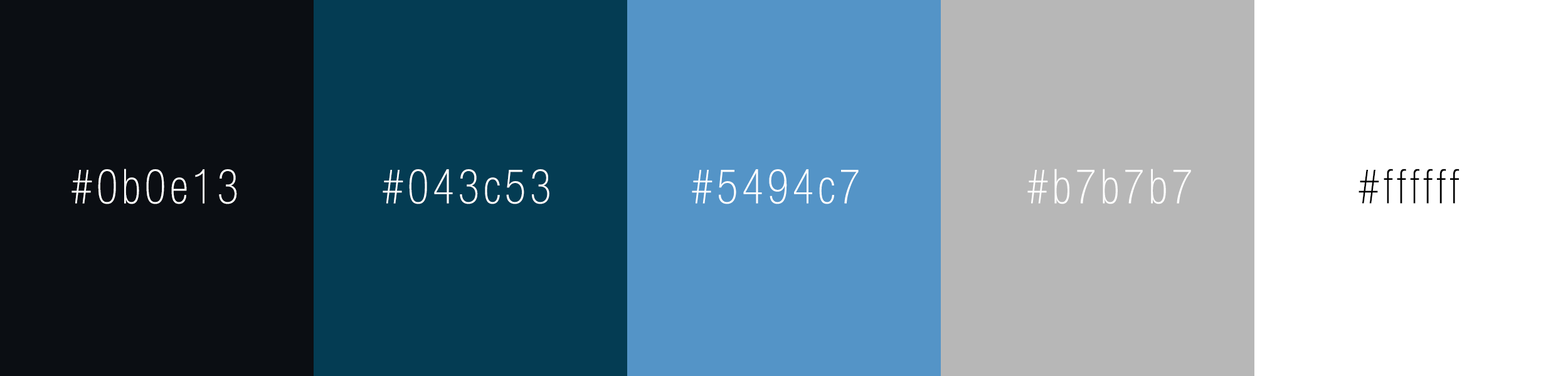
<style>
.page{position:relative;width:1568px;height:376px;background:#ffffff}
.page>*{position:absolute;margin:0}
.t1{font:47.9px "HelveticaNeueLTStd-ThCn";letter-spacing:0.1em;color:#ffffff;scale:0.91 1}
.t2{font:47.9px "HelveticaNeueLTStd-ThCn";letter-spacing:0.1em;color:#000000;scale:0.91 1}
</style>
<div class="page">
<p class="t1" style="left:72px;top:169px;width:165px;height:35px">#0b0e13</p>
<p class="t1" style="left:383px;top:169px;width:166px;height:35px">#043c53</p>
<p class="t1" style="left:692px;top:169px;width:167px;height:35px">#5494c7</p>
<p class="t1" style="left:1027px;top:169px;width:164px;height:35px">#b7b7b7</p>
<p class="t2" style="left:1359px;top:169px;width:100px;height:35px">#ffffff</p>
</div>
